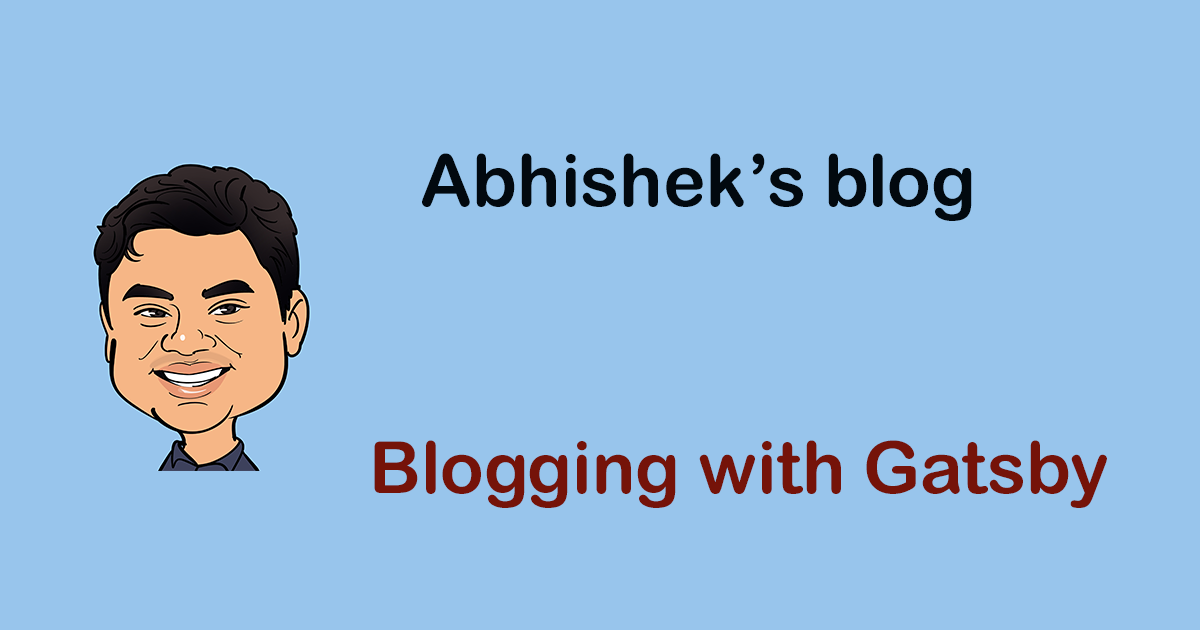
<style>
.page{position:relative;width:1200px;height:630px;background:#98c5ec}
.page>*{position:absolute;margin:0}
.t1{font:72px "ArialRoundedMTBold";color:#02090f}
.t2{font:72px "ArialRoundedMTBold";color:#751309}
</style>
<div class="page">
<p class="t1" style="left:422px;top:153px;width:550px;height:68px">Abhishek’s blog</p>
<p class="t2" style="left:374px;top:440px;width:733px;height:68px">Blogging with Gatsby</p>
</div>
